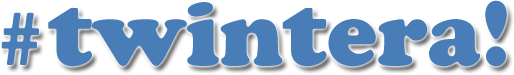
<style>
.page{position:relative;width:514px;height:75px;background:#497db8}
.page>*{position:absolute;margin:0}
.t1{font:90px "CooperBlackStd";color:#497db8}
</style>
<div class="page">
<p class="t1" style="left:1px;top:0px;width:506px;height:67px">#twintera!</p>
</div>
